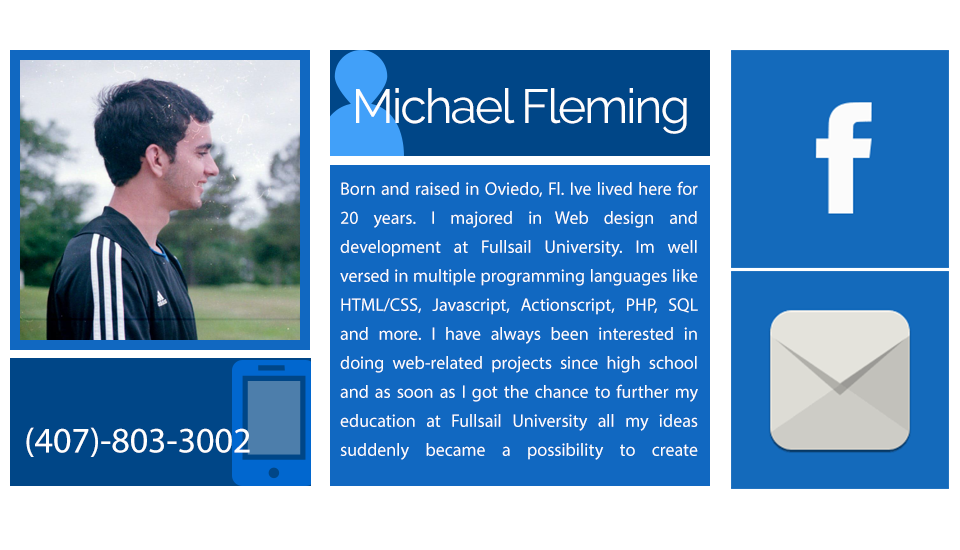
<style>
.page{position:relative;width:960px;height:550px;background:#ffffff}
.page>*{position:absolute;margin:0}
.t1{font:48px "Raleway-Regular";letter-spacing:-0.04em;color:#fefefe}
.t2{font:18px/29px "MyriadPro-Regular";color:#fefefe}
.t3{font:36px "MyriadPro-Regular";color:#fefefe}
</style>
<div class="page">
<p class="t1" style="left:356px;top:88px;width:331px;height:46px">Michael Fleming</p>
<p class="t2" style="left:340px;top:181px;width:358px;height:279px;text-align:justify">Born and raised in Oviedo, Fl. Ive lived here for 20 years. I majored in Web design and development at Fullsail University. Im well versed in multiple programming languages like HTML/CSS, Javascript, Actionscript, PHP, SQL and more. I have always been interested in doing web-related projects since high school and as soon as I got the chance to further my education at Fullsail University all my ideas suddenly became a possibility to create</p>
<p class="t3" style="left:26px;top:427px;width:224px;height:30px">(407)-803-3002</p>
</div>
